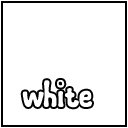
<style>
.page{position:relative;width:128px;height:128px;background:#ffffff}
.page>*{position:absolute;margin:0}
.t1{font:36px "ChubbyCheeks";color:#ffffff}
</style>
<div class="page">
<p class="t1" style="left:22px;top:80px;width:70px;height:28px">white</p>
</div>
